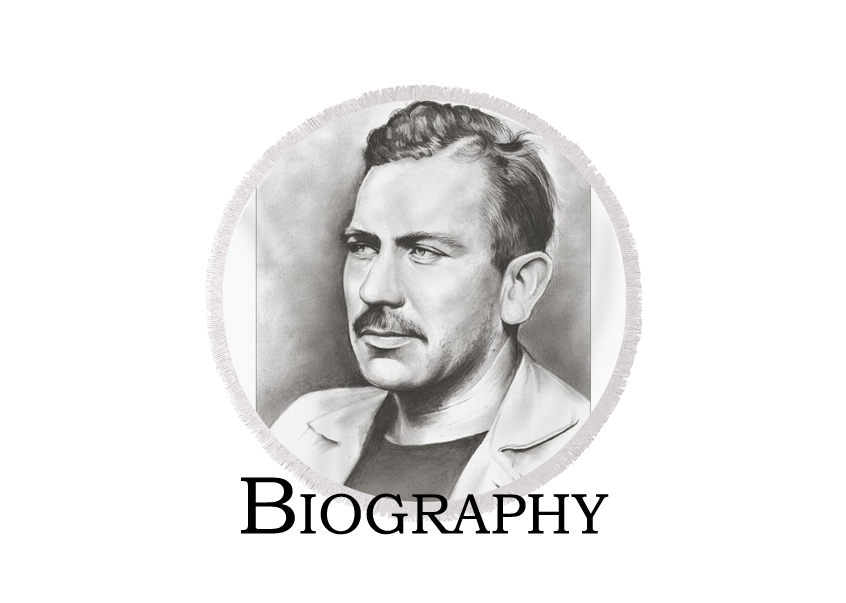
<style>
.page{position:relative;width:846px;height:603px;background:#ffffff}
.page>*{position:absolute;margin:0}
.t1{font:82px "BookmanOldStyle";color:#000000;font-variant:small-caps}
</style>
<div class="page">
<p class="t1" style="left:241px;top:477px;width:368px;height:58px">Biography</p>
</div>
